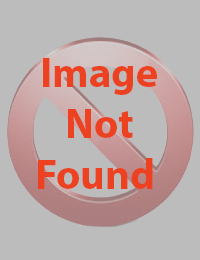
<style>
.page{position:relative;width:200px;height:260px;background:#bcbcbc}
.page>*{position:absolute;margin:0}
.t1{font:42.3px "MyriadHebrew-Bold";color:#ed4221}
</style>
<div class="page">
<p class="t1" style="left:38px;top:58px;width:119px;height:131px;text-align:center">Image <br>Not <br>Found</p>
</div>
